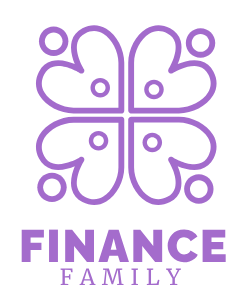
<style>
.page{position:relative;width:241px;height:301px;background:#ffffff}
.page>*{position:absolute;margin:0}
.t1{font:45.6px "Raleway-Black";letter-spacing:0.037em;color:#a46ccc}
.t2{font:22.1px "Merriweather-Regular";letter-spacing:0.3em;color:#a46ccc}
</style>
<div class="page">
<p class="t1" style="left:21px;top:229px;width:205px;height:34px">FINANCE</p>
<p class="t2" style="left:60px;top:268px;width:121px;height:17px">FAMILY</p>
</div>
